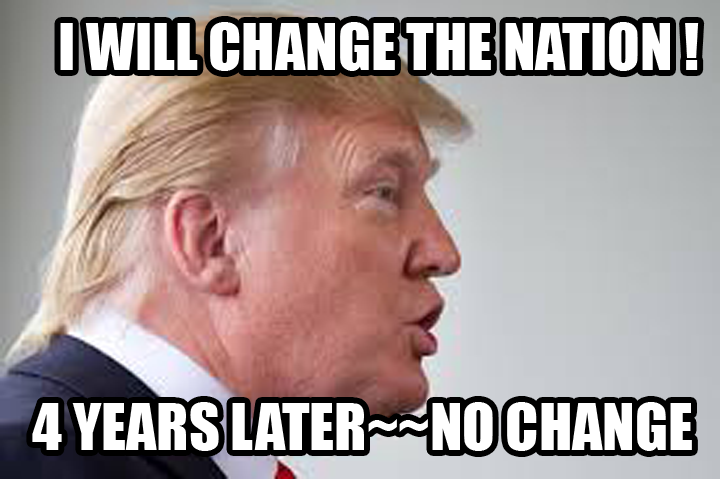
<style>
.page{position:relative;width:720px;height:479px}
.page>*{position:absolute;margin:0}
.t1{font:60px "Impact";color:#ffffff}
</style>
<div class="page">
<p class="t1" style="left:60px;top:22px;width:639px;height:49px">I WILL CHANGE THE NATION !</p>
<p class="t1" style="left:32px;top:402px;width:660px;height:49px">4 YEARS LATER~~NO CHANGE</p>
</div>
